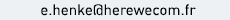
<style>
.page{position:relative;width:230px;height:20px;background:#edf1f4}
.page>*{position:absolute;margin:0}
.t1{font:15px "DINPro-Regular";color:#000000}
</style>
<div class="page">
<p class="t1" style="left:41px;top:4px;width:155px;height:12px">e.henke@herewecom.fr</p>
</div>
